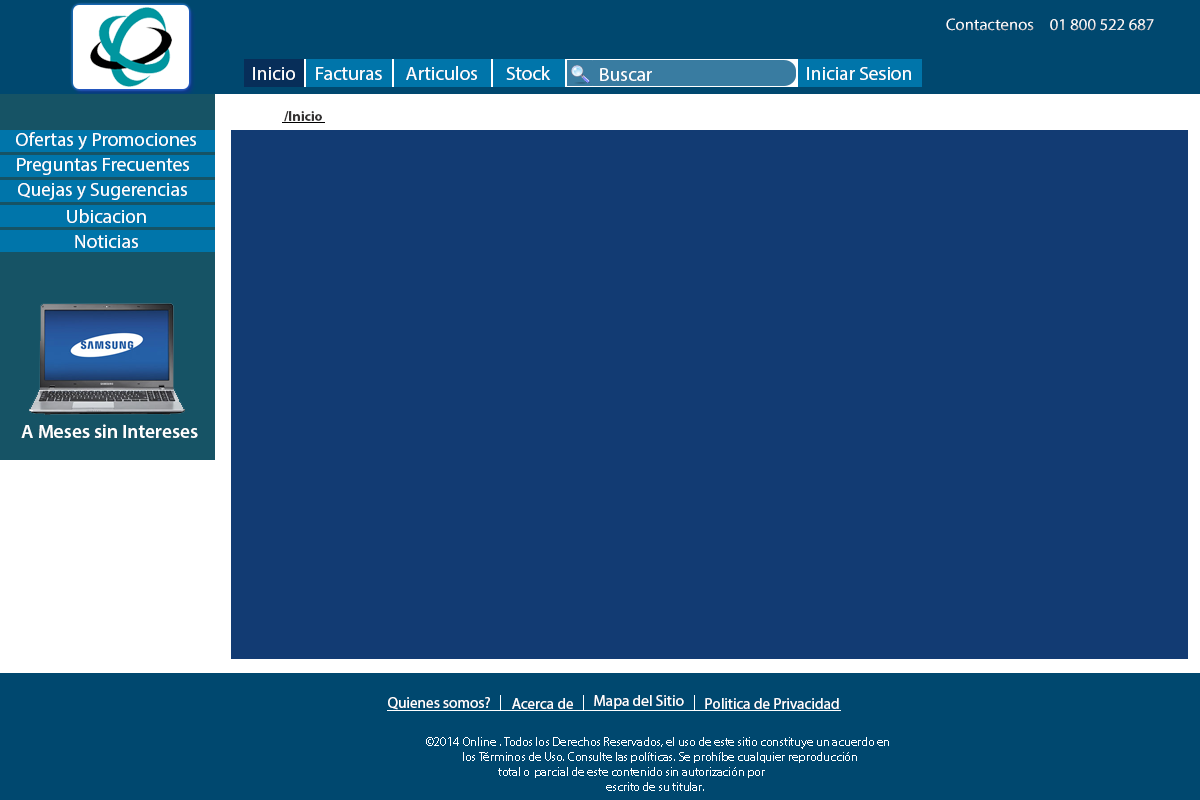
<style>
.page{position:relative;width:1200px;height:800px;background:#123b73}
.page>*{position:absolute;margin:0}
.t1{font:16.7px "MyriadPro-Regular";color:#ffffff}
.t2{font:19.4px "MyriadPro-Regular";color:#ffffff}
.t3{font:13.9px "MyriadPro-Bold";color:#343232}
.t4{font:19.4px "MyriadPro-Semibold";color:#ffffff}
.t5{font:15.3px "MyriadPro-Regular";color:#ffffff}
.t6{font:12.5px "MyriadPro-Regular";color:#ffffff}
</style>
<div class="page">
<p class="t1" style="left:946px;top:18px;width:88px;height:13px">Contactenos</p>
<p class="t1" style="left:1050px;top:19px;width:104px;height:12px">01 800 522 687</p>
<p class="t2" style="left:253px;top:67px;width:42px;height:13px">Inicio</p>
<p class="t2" style="left:253px;top:67px;width:42px;height:13px">Inicio</p>
<p class="t2" style="left:316px;top:67px;width:66px;height:13px">Facturas</p>
<p class="t2" style="left:406px;top:66px;width:71px;height:14px">Articulos</p>
<p class="t2" style="left:506px;top:66px;width:45px;height:14px">Stock</p>
<p class="t2" style="left:600px;top:68px;width:52px;height:13px">Buscar</p>
<p class="t2" style="left:807px;top:67px;width:104px;height:13px">Iniciar Sesion</p>
<p class="t3" style="left:284px;top:111px;width:38px;height:11px">/Inicio</p>
<p class="t2" style="left:16px;top:132px;width:180px;height:18px">Ofertas y Promociones</p>
<p class="t2" style="left:17px;top:158px;width:172px;height:17px">Preguntas Frecuentes</p>
<p class="t2" style="left:18px;top:183px;width:169px;height:17px">Quejas y Sugerencias</p>
<p class="t2" style="left:67px;top:209px;width:79px;height:14px">Ubicacion</p>
<p class="t2" style="left:75px;top:235px;width:63px;height:13px">Noticias</p>
<p class="t4" style="left:21px;top:424px;width:177px;height:14px">A Meses sin Intereses</p>
<p class="t5" style="left:388px;top:697px;width:102px;height:13px">Quienes somos?</p>
<p class="t5" style="left:512px;top:698px;width:61px;height:11px">Acerca de</p>
<p class="t5" style="left:594px;top:695px;width:90px;height:14px">Mapa del Sitio</p>
<p class="t5" style="left:705px;top:698px;width:134px;height:11px">Politica de Privacidad</p>
<p class="t6" style="left:426px;top:737px;width:463px;height:54px">©2014 Online . Todos los Derechos Reservados, el uso de este sitio constituye un acuerdo en<br> los Términos de Uso. Consulte las políticas. Se prohíbe cualquier reproducción <br>  total o parcial de este contenido sin autorización por <br>     escrito de su titular.</p>
</div>
